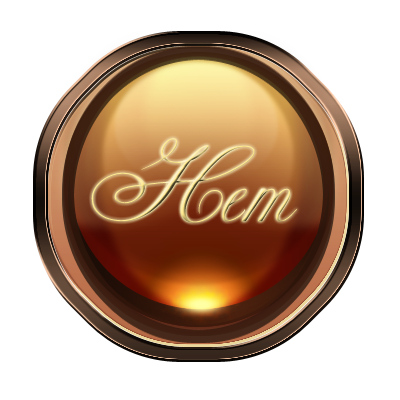
<style>
.page{position:relative;width:400px;height:400px;background:#ffffff}
.page>*{position:absolute;margin:0}
.t1{font:72px "EkaterinaVelikayaOne"}
</style>
<div class="page">
<p class="t1" style="left:91px;top:138px;width:207px;height:85px">Нет</p>
</div>
